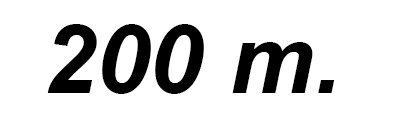
<style>
.page{position:relative;width:420px;height:120px;background:#ffffff}
.page>*{position:absolute;margin:0}
.t1{font:96px "Arial-BoldItalicMT";color:#000000}
</style>
<div class="page">
<p class="t1" style="left:47px;top:24px;width:288px;height:70px">200 m.</p>
</div>
